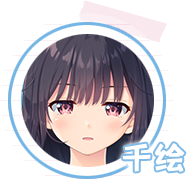
<style>
.page{position:relative;width:188px;height:187px;background:#ffffff}
.page>*{position:absolute;margin:0}
.t1{font:19.3px "shetumodengxiaofangti";color:#ffffff;font-weight:bold}
</style>
<div class="page">
<p class="t1" style="left:122px;top:143px;width:63px;height:29px">千绘</p>
</div>
